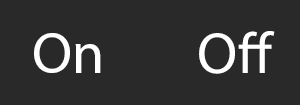
<style>
.page{position:relative;width:300px;height:105px;background:#292929}
.page>*{position:absolute;margin:0}
.t1{font:58.3px "MyriadPro-Regular";color:#ffffff}
</style>
<div class="page">
<p class="t1" style="left:34px;top:33px;width:67px;height:40px">On</p>
<p class="t1" style="left:199px;top:31px;width:76px;height:43px">Off</p>
</div>
